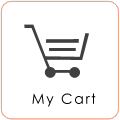
<style>
.page{position:relative;width:120px;height:120px;background:#ffffff}
.page>*{position:absolute;margin:0}
.t1{font:14px "CenturyGothic";letter-spacing:0.121em;color:#000000}
</style>
<div class="page">
<p class="t1" style="left:32px;top:93px;width:64px;height:14px">My Cart</p>
</div>
